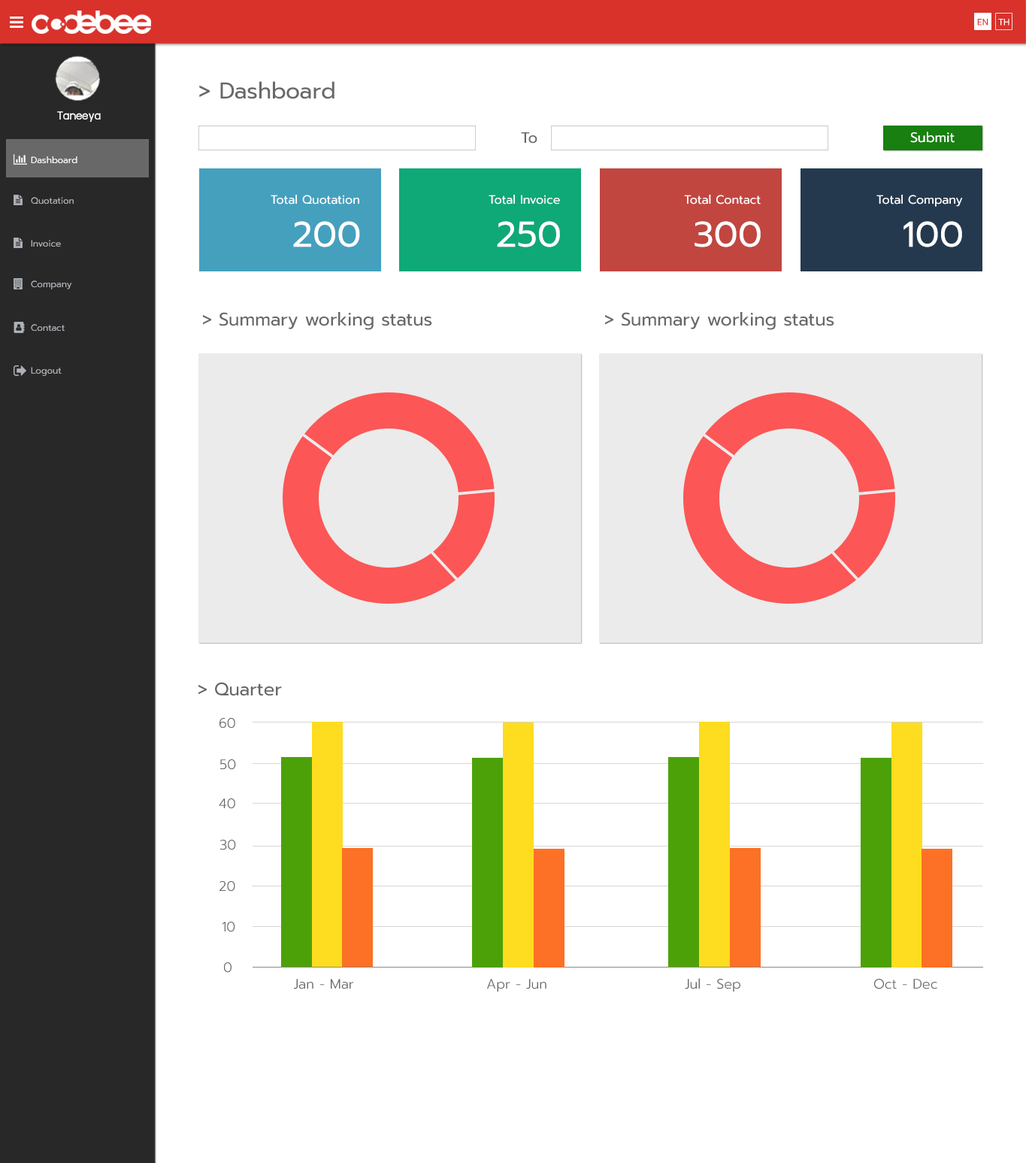
<style>
.page{position:relative;width:1026px;height:1163px;background:#ffffff}
.page>*{position:absolute;margin:0}
.t1{font:9px "Prompt-Regular";color:#d8322b}
.t2{font:9px "Prompt-Regular";color:#ffffff}
.t3{font:22.5px "Prompt-Regular";color:#686868}
.t4{font:13.5px "supermarket";color:#ffffff}
.t5{font:15px "Prompt-Regular";color:#686868}
.t6{font:13.5px "Prompt-Regular";color:#ffffff}
.t7{font:9px "Prompt-Regular";color:#aeb2b7}
.t8{font:12px "Prompt-Regular";color:#ffffff}
.t9{font:36.1px "Prompt-Regular";color:#ffffff}
.t10{font:18px "Prompt-Regular";color:#686868}
.t11{font:13.5px "Prompt-Light";color:#686868}
</style>
<div class="page">
<p class="t1" style="left:977px;top:19px;width:11px;height:7px">EN</p>
<p class="t2" style="left:998px;top:19px;width:11px;height:7px">TH</p>
<p class="t3" style="left:199px;top:81px;width:135px;height:18px">&gt; Dashboard</p>
<p class="t4" style="left:57px;top:111px;width:44px;height:11px">Taneeya</p>
<p class="t5" style="left:521px;top:132px;width:16px;height:12px">To</p>
<p class="t6" style="left:910px;top:132px;width:44px;height:11px">Submit</p>
<p class="t2" style="left:31px;top:156px;width:46px;height:8px">Dashboard</p>
<p class="t7" style="left:31px;top:197px;width:43px;height:7px">Quotation</p>
<p class="t8" style="left:271px;top:195px;width:88px;height:9px">Total Quotation</p>
<p class="t8" style="left:488px;top:195px;width:72px;height:9px">Total Invoice</p>
<p class="t8" style="left:684px;top:195px;width:76px;height:9px">Total Contact</p>
<p class="t8" style="left:876px;top:195px;width:87px;height:12px">Total Company</p>
<p class="t9" style="left:293px;top:221px;width:67px;height:26px">200</p>
<p class="t9" style="left:497px;top:221px;width:63px;height:26px">250</p>
<p class="t9" style="left:694px;top:221px;width:66px;height:26px">300</p>
<p class="t9" style="left:903px;top:221px;width:59px;height:26px">100</p>
<p class="t7" style="left:31px;top:240px;width:30px;height:7px">Invoice</p>
<p class="t7" style="left:31px;top:280px;width:41px;height:9px">Company</p>
<p class="t10" style="left:203px;top:312px;width:229px;height:18px">&gt; Summary working status</p>
<p class="t10" style="left:605px;top:312px;width:229px;height:18px">&gt; Summary working status</p>
<p class="t7" style="left:31px;top:324px;width:34px;height:7px">Contact</p>
<p class="t7" style="left:31px;top:367px;width:31px;height:9px">Logout</p>
<p class="t10" style="left:198px;top:682px;width:84px;height:14px">&gt; Quarter</p>
<p class="t11" style="left:219px;top:718px;width:16px;height:10px">60</p>
<p class="t11" style="left:220px;top:759px;width:16px;height:10px">50</p>
<p class="t11" style="left:219px;top:798px;width:16px;height:11px">40</p>
<p class="t11" style="left:220px;top:839px;width:16px;height:11px">30</p>
<p class="t11" style="left:219px;top:881px;width:16px;height:10px">20</p>
<p class="t11" style="left:222px;top:921px;width:13px;height:11px">10</p>
<p class="t11" style="left:224px;top:962px;width:7px;height:10px">0</p>
<p class="t11" style="left:685px;top:978px;width:55px;height:13px">Jul - Sep</p>
<p class="t11" style="left:294px;top:978px;width:60px;height:11px">Jan - Mar</p>
<p class="t11" style="left:487px;top:978px;width:59px;height:13px">Apr - Jun</p>
<p class="t11" style="left:874px;top:978px;width:63px;height:11px">Oct - Dec</p>
</div>
